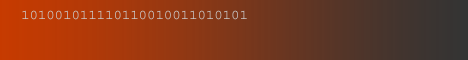
<style>
.page{position:relative;width:468px;height:60px}
.page>*{position:absolute;margin:0}
.t1{font:14px "Courier";color:#cbcbcc}
</style>
<div class="page">
<p class="t1" style="left:22px;top:10px;width:225px;height:10px">101001011110110010011010101</p>
</div>
